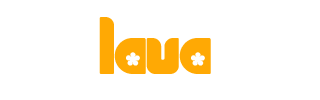
<style>
.page{position:relative;width:320px;height:100px;background:#ffffff}
.page>*{position:absolute;margin:0}
.t1{font:72px "Chick";color:#ffa904}
</style>
<div class="page">
<p class="t1" style="left:99px;top:17px;width:112px;height:57px">lava</p>
</div>
